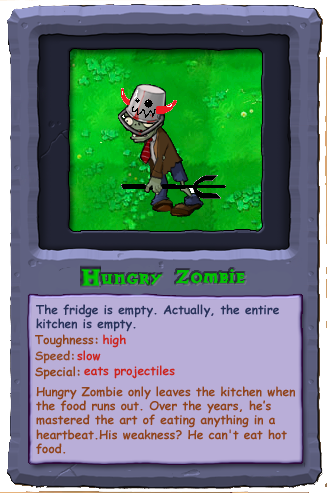
<style>
.page{position:relative;width:327px;height:493px;background:#b9aed8}
.page>*{position:absolute;margin:0}
.t1{font:12px "ComicSansMS-Bold";color:#28325a}
.t2{font:12px "ComicSansMS-Bold";color:#8f431b}
.t3{font:12px "ComicSansMS-Bold";color:#cc241d}
.t4{font:12px "ComicSansMS-Bold";color:#924a28}
</style>
<div class="page">
<p class="t1" style="left:36px;top:304px;width:243px;height:28px">The fridge is empty. Actually, the entire <br>kitchen is empty.</p>
<p class="t2" style="left:35px;top:334px;width:63px;height:14px">Toughness:</p>
<p class="t3" style="left:103px;top:334px;width:23px;height:14px">high</p>
<p class="t4" style="left:35px;top:350px;width:39px;height:14px">Speed:</p>
<p class="t3" style="left:77px;top:350px;width:24px;height:11px">slow</p>
<p class="t2" style="left:35px;top:366px;width:45px;height:14px">Special:</p>
<p class="t3" style="left:84px;top:365px;width:91px;height:14px">eats projectiles</p>
<p class="t2" style="left:36px;top:386px;width:259px;height:68px">Hungry Zombie only leaves the kitchen when <br>the food runs out. Over the years, he’s<br>mastered the art of eating anything in a<br>heartbeat.His weakness? He can't eat hot <br>food.</p>
</div>
